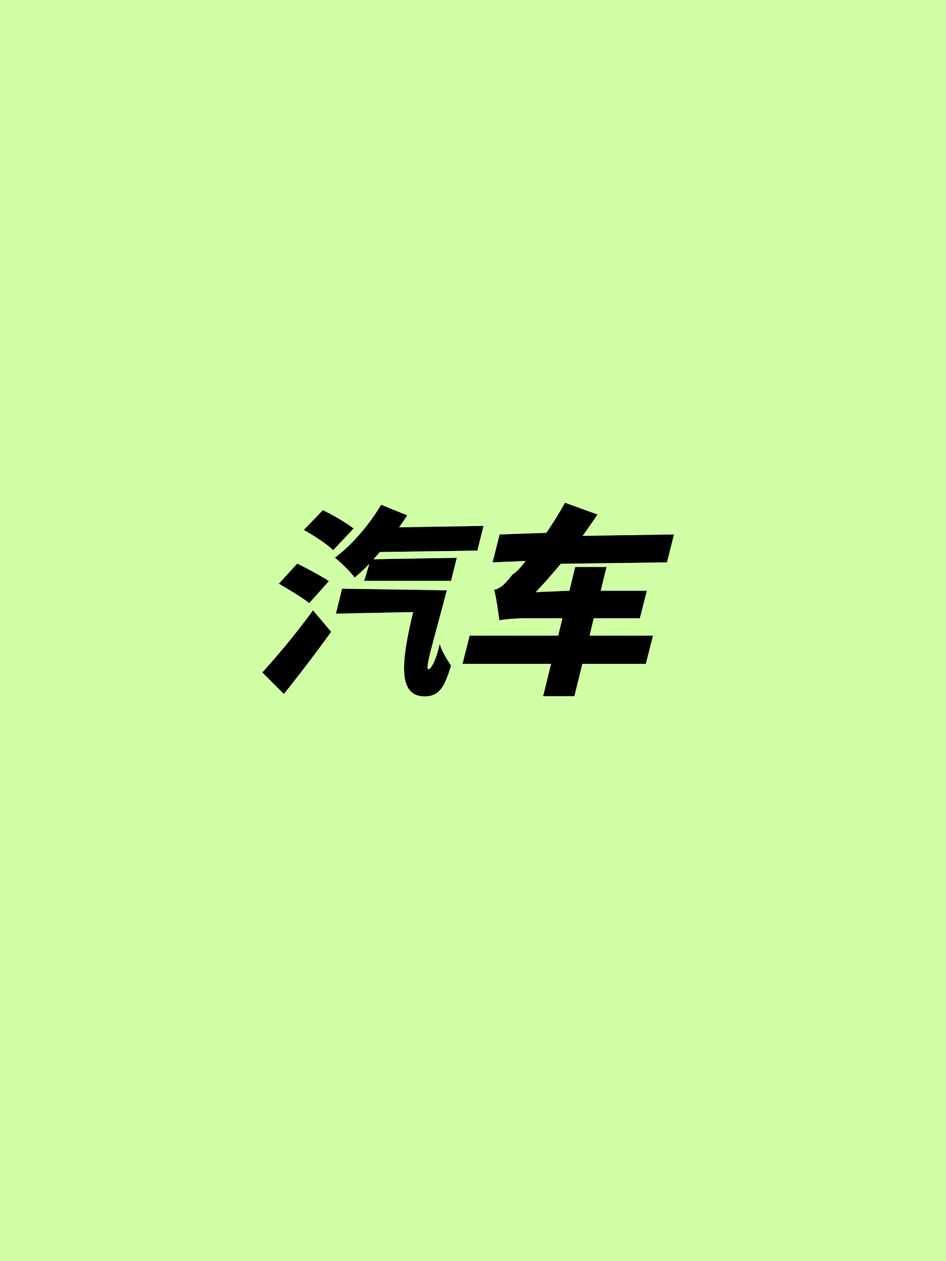
<style>
.page{position:relative;width:946px;height:1261px;background:#d1ffa6}
.page>*{position:absolute;margin:0}
.t1{font:199.5px "Source-KeynoteartHans-Regular";color:#000000}
</style>
<div class="page">
<p class="t1" style="left:262px;top:502px;width:412px;height:195px">汽车</p>
</div>
